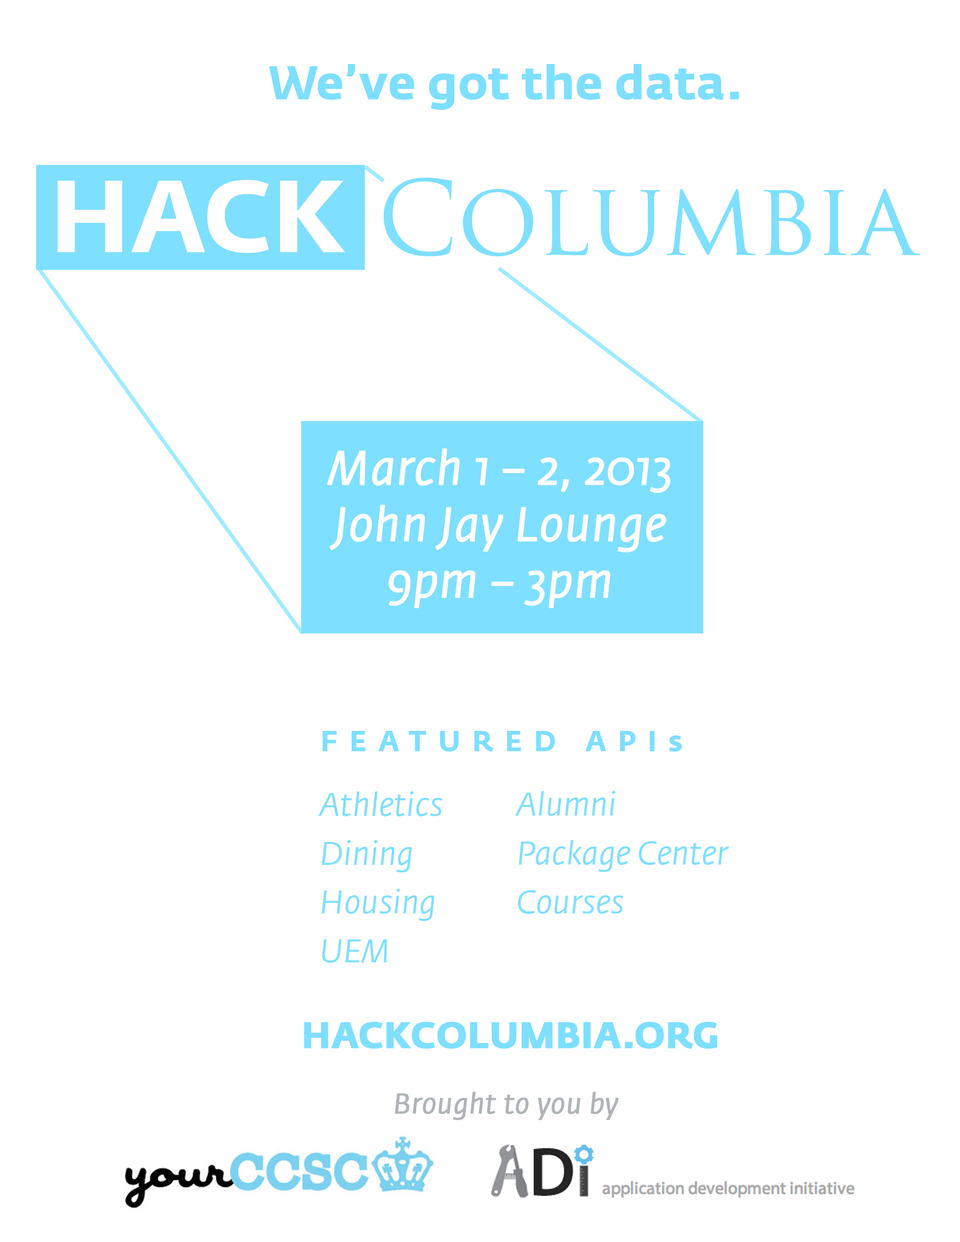
<style>
.page{position:relative;width:960px;height:1242px;background:#ffffff}
.page>*{position:absolute;margin:0}
.t1{font:47.1px "FedraSansStd-Bold";color:#7edfff}
.t2{font:101px "FedraSansStd-Bold";color:#ffffff}
.t3{font:101px "TrajanPro-Regular";color:#7edfff}
.t4{font:47.1px "FedraSansStd-BookItalic";color:#ffffff;font-weight:bold}
.t5{font:28.5px "FedraSansStd-Bold";letter-spacing:0.4em;color:#7edfff}
.t6{font:32.6px/48.9px "FedraSansStd-BookItalic";color:#7edfff}
.t7{font:36.1px "FedraSansStd-Bold";color:#7edfff;font-weight:bold}
.t8{font:28.2px "FedraSansStd-BookItalic";color:#aeb5b7;font-weight:bold}
</style>
<div class="page">
<p class="t1" style="left:269px;top:64px;width:470px;height:46px">We’ve got the data.</p>
<p class="t2" style="left:58px;top:180px;width:287px;height:73px">HACK</p>
<p class="t3" style="left:384px;top:178px;width:536px;height:79px">Columbia</p>
<p class="t4" style="left:327px;top:448px;width:343px;height:160px;text-align:center">March 1 – 2, 2013<br>John Jay Lounge<br>9pm – 3pm</p>
<p class="t5" style="left:323px;top:731px;width:359px;height:21px">FEATURED APIs</p>
<p class="t6" style="left:318px;top:791px;width:124px;height:172px">Athletics<br>Dining<br>Housing<br>UEM</p>
<p class="t6" style="left:515px;top:791px;width:214px;height:123px">Alumni<br>Package Center<br>Courses</p>
<p class="t7" style="left:304px;top:1022px;width:413px;height:27px">HACKCOLUMBIA.ORG</p>
<p class="t8" style="left:395px;top:1092px;width:223px;height:28px">Brought to you by</p>
</div>
